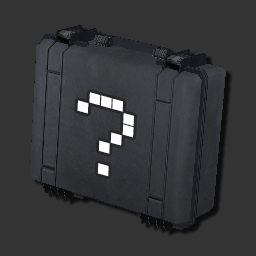
<style>
.page{position:relative;width:256px;height:256px;background:#333333}
.page>*{position:absolute;margin:0}
.t1{font:79.1px "HD44780A00-5x8";color:#ffffff;scale:1.05 1}
</style>
<div class="page">
<p class="t1" style="left:77px;top:92px;width:57px;height:85px;rotate:15deg">?</p>
</div>
